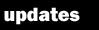
<style>
.page{position:relative;width:99px;height:30px;background:#000000}
.page>*{position:absolute;margin:0}
.t1{font:19.9px "FranklinGothic-Heavy";color:#ffffff}
</style>
<div class="page">
<p class="t1" style="left:4px;top:7px;width:76px;height:18px">updates</p>
</div>
